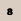
<style>
.page{position:relative;width:21px;height:21px;background:#d9cdc1}
.page>*{position:absolute;margin:0}
.t1{font:9px "Tahoma-Bold";color:#000000}
</style>
<div class="page">
<p class="t1" style="left:7px;top:8px;width:6px;height:7px">8</p>
</div>
